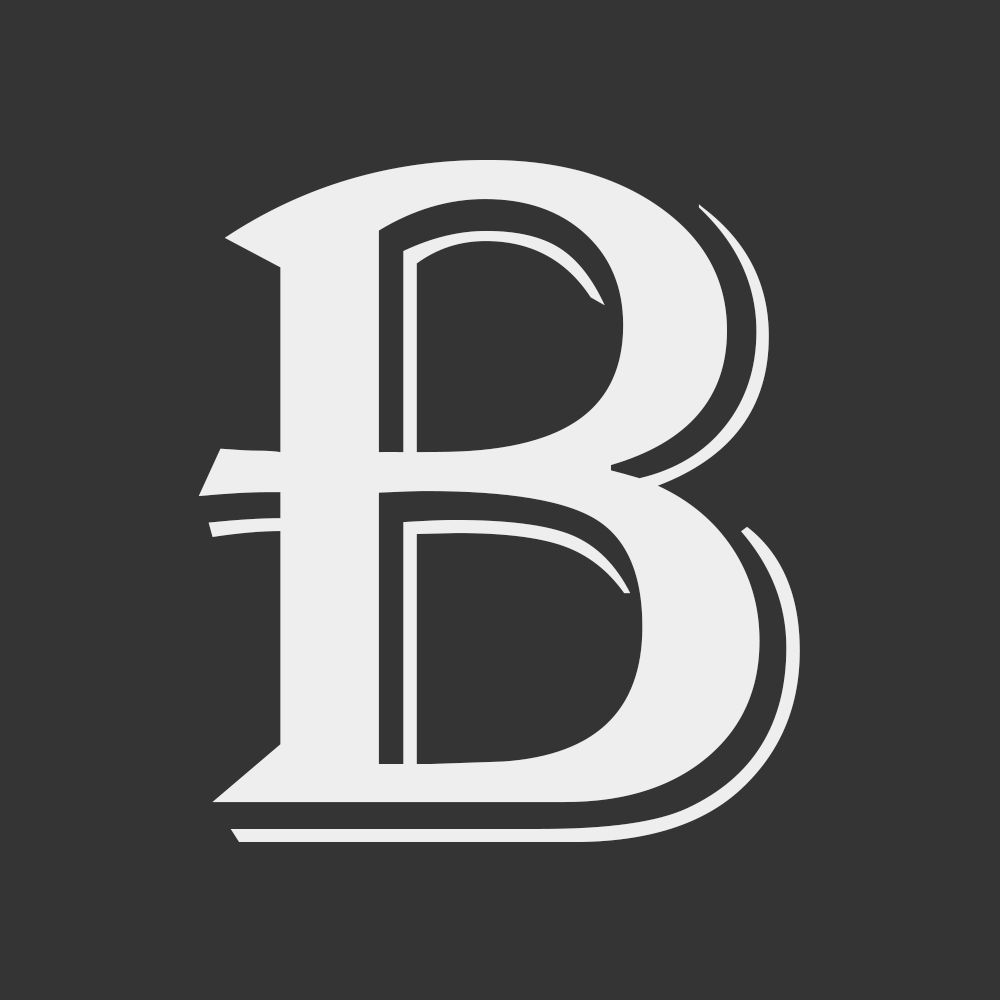
<style>
.page{position:relative;width:1000px;height:1000px;background:#343434}
.page>*{position:absolute;margin:0}
.t1{font:1007.3px "Algerian";color:#eeeeee}
</style>
<div class="page">
<p class="t1" style="left:198px;top:160px;width:602px;height:682px">B</p>
</div>
